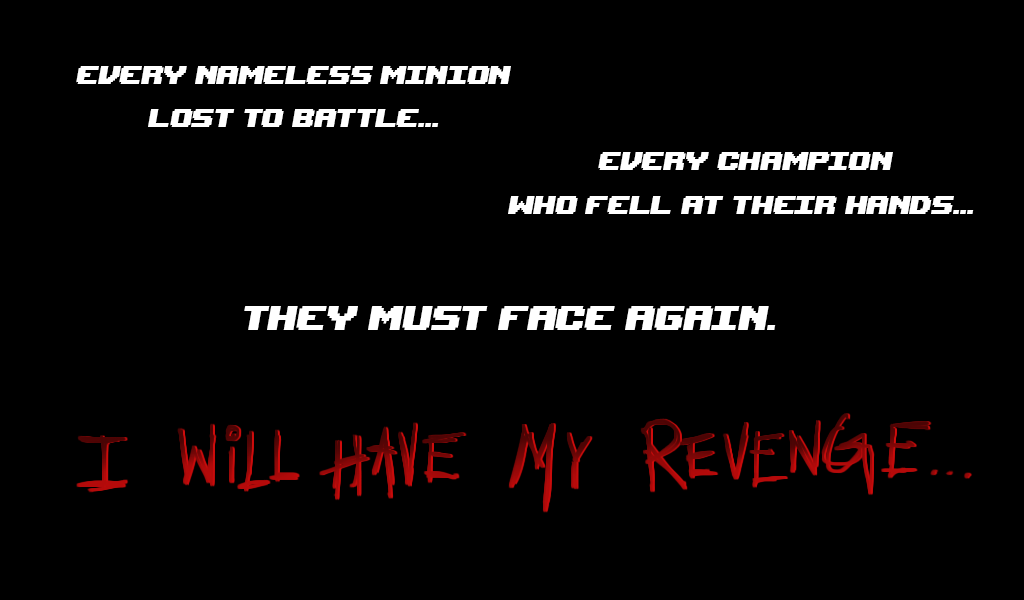
<style>
.page{position:relative;width:1024px;height:600px;background:#000000}
.page>*{position:absolute;margin:0}
.t1{font:36px "UpheavalPro-Regular";color:#ffffff;font-style:italic}
.t2{font:48px "UpheavalPro-Regular";color:#ffffff;font-style:italic}
</style>
<div class="page">
<p class="t1" style="left:76px;top:66px;width:898px;height:148px">Every nameless minion<br>        lost to battle...<br>                                                          every champion<br>                                                who fell at their hands...</p>
<p class="t2" style="left:244px;top:306px;width:532px;height:24px">They must face again.</p>
</div>
